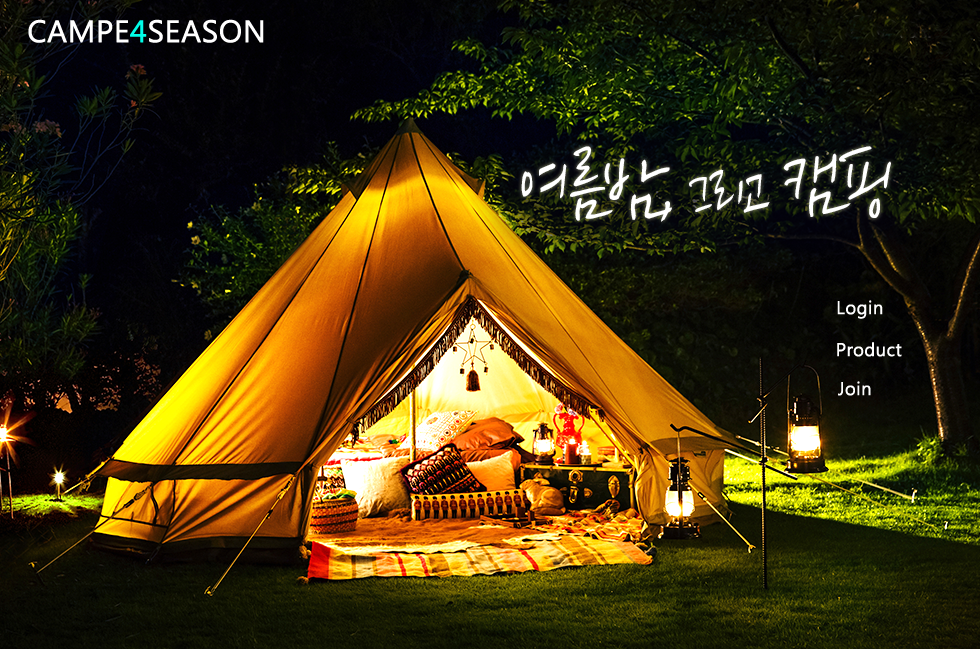
<style>
.page{position:relative;width:980px;height:649px}
.page>*{position:absolute;margin:0}
.t1{font:30px "MalgunGothicRegular";color:#ffffff;font-weight:bold}
.t2{font:30px "MalgunGothicRegular";color:#01fce7;font-weight:bold}
.t3{font:18px "MalgunGothicRegular";color:#ffffff;font-weight:bold}
</style>
<div class="page">
<p class="t1" style="left:28px;top:19px;width:236px;height:24px">CAMPE<span class="t2">4</span>SEASON</p>
<p class="t3" style="left:837px;top:300px;width:46px;height:19px">Login</p>
<p class="t3" style="left:837px;top:342px;width:65px;height:15px">Product</p>
<p class="t3" style="left:838px;top:381px;width:33px;height:15px">Join</p>
</div>
